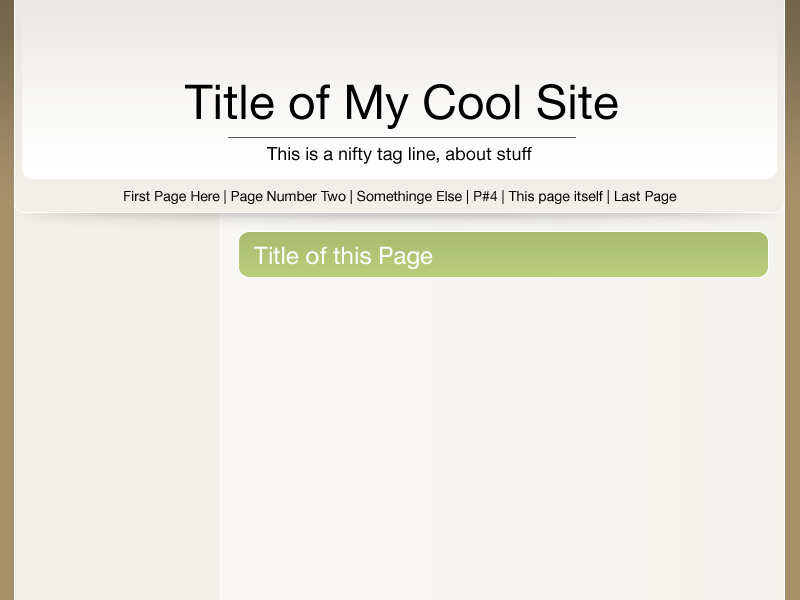
<style>
.page{position:relative;width:800px;height:600px}
.page>*{position:absolute;margin:0}
.t1{font:48px "HelveticaNeue";color:#000000}
.t2{font:18px "HelveticaNeue";color:#000000}
.t3{font:14px "HelveticaNeue";color:#000000}
.t4{font:24px "HelveticaNeue";color:#ffffff}
</style>
<div class="page">
<p class="t1" style="left:185px;top:84px;width:433px;height:45px">Title of My Cool Site</p>
<p class="t2" style="left:267px;top:147px;width:265px;height:17px">This is a nifty tag line, about stuff</p>
<p class="t3" style="left:124px;top:190px;width:553px;height:14px">First Page Here | Page Number Two | Somethinge Else | P#4 | This page itself | Last Page</p>
<p class="t4" style="left:254px;top:246px;width:179px;height:23px">Title of this Page</p>
</div>
